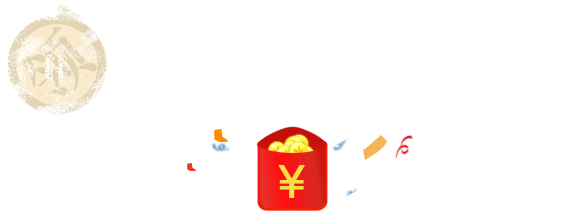
<style>
.page{position:relative;width:580px;height:220px;background:#ffffff}
.page>*{position:absolute;margin:0}
.t1{font:48px "STXihei";color:#f9df44;font-weight:bold}
</style>
<div class="page">
<p class="t1" style="left:278px;top:165px;width:27px;height:33px">￥</p>
</div>
